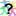
<style>
.page{position:relative;width:16px;height:16px}
.page>*{position:absolute;margin:0}
.t1{font:14.1px "ArialMT";color:#000000;scale:1.24 1}
</style>
<div class="page">
<p class="t1" style="left:4px;top:3px;width:9px;height:11px">?</p>
</div>
